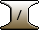
<style>
.page{position:relative;width:39px;height:30px;background:#ffffff}
.page>*{position:absolute;margin:0}
.t1{font:11px "Verdana";color:#000000}
</style>
<div class="page">
<p class="t1" style="left:16px;top:10px;width:6px;height:10px">/</p>
</div>
